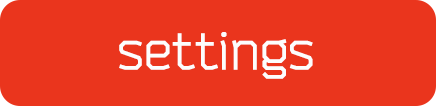
<style>
.page{position:relative;width:436px;height:106px;background:#ea351d}
.page>*{position:absolute;margin:0}
.t1{font:54px "Bender";color:#fdfdfd}
</style>
<div class="page">
<p class="t1" style="left:119px;top:32px;width:194px;height:47px">settings</p>
</div>
